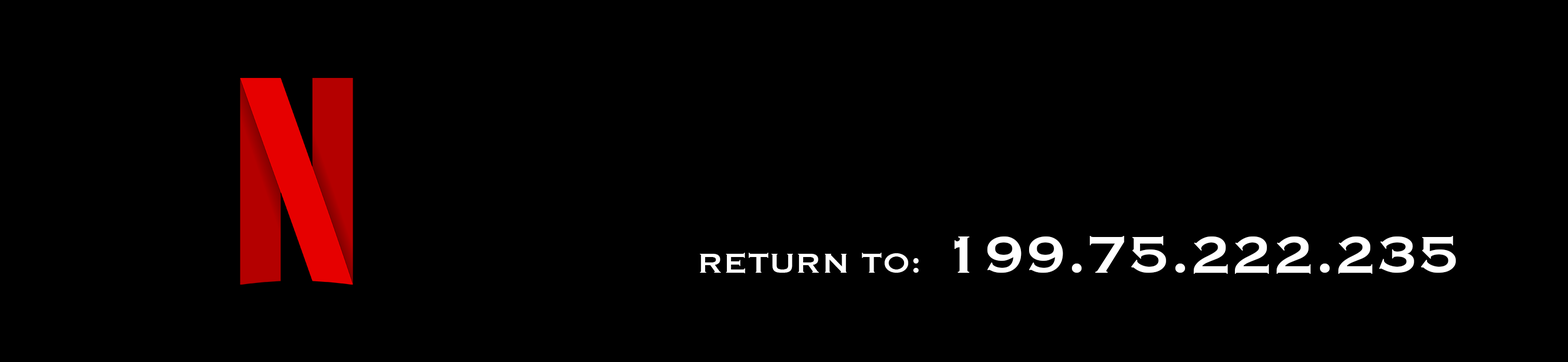
<style>
.page{position:relative;width:1568px;height:362px;background:#000000}
.page>*{position:absolute;margin:0}
.t1{font:67.7px "Copperplate";color:#ffffff}
.t2{font:36.1px "Copperplate";color:#ffffff}
</style>
<div class="page">
<p class="t1" style="left:700px;top:236px;width:756px;height:38px"><span class="t2">RETURN TO:</span> 199.75.222.235</p>
</div>
